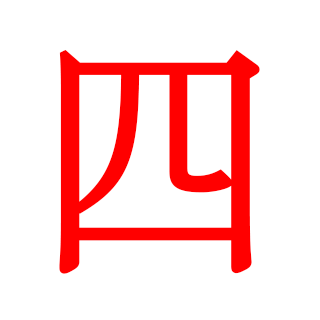
<style>
.page{position:relative;width:320px;height:320px;background:#ffffff}
.page>*{position:absolute;margin:0}
.t1{font:250px "AdobeSongStd-Light";letter-spacing:0.2em;color:#ff0000;font-weight:bold}
</style>
<div class="page">
<p class="t1" style="left:59px;top:49px;width:201px;height:225px">四</p>
</div>
